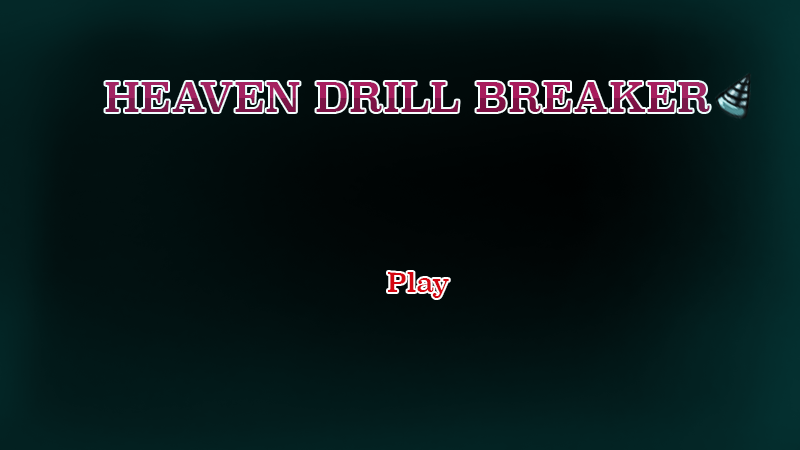
<style>
.page{position:relative;width:800px;height:450px}
.page>*{position:absolute;margin:0}
.t1{font:40.4px "Superclarendon-Regular"}
.t2{font:25.7px "Superclarendon-Regular";color:#d40711}
</style>
<div class="page">
<p class="t1" style="left:105px;top:82px;width:605px;height:30px">HEAVEN DRILL BREAKER</p>
<p class="t2" style="left:388px;top:272px;width:61px;height:26px">Play</p>
</div>
